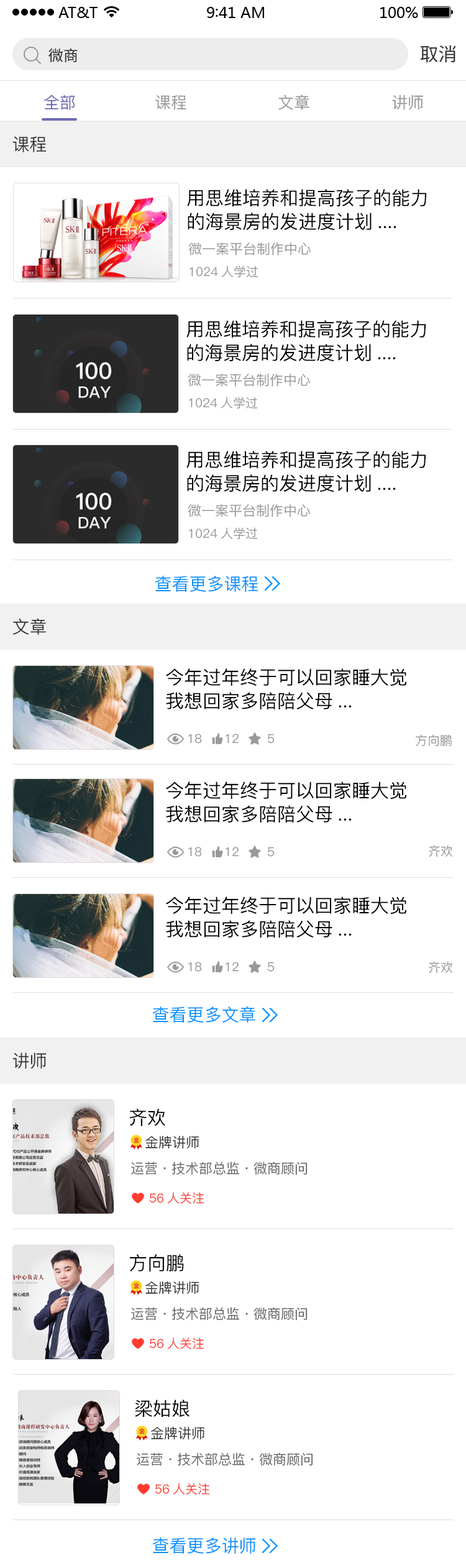
<style>
.page{position:relative;width:466px;height:1568px;background:#ffffff}
.page>*{position:absolute;margin:0}
.t1{font:14.9px "SourceHanSansCN-Regular";color:#333333}
.t2{font:18.7px "SourceHanSansCN-Regular";color:#333333}
.t3{font:16.2px "PingFang-SC-Medium";color:#6e6ab4}
.t4{font:16.2px "PingFang-SC-Medium";color:#999999}
.t5{font:17.4px "PingFang-SC-Medium";color:#333333}
.t6{font:18.7px/23.6px "PingFang-SC-Medium";color:#000000}
.t7{font:13.7px "PingFang-SC-Medium";color:#999999}
.t8{font:12.4px "PingFang-SC-Medium";color:#999999}
.t9{font:17.4px "PingFang-SC-Medium";color:#0090ff}
.t10{font:18.7px "PingFang-SC-Medium";color:#000000}
.t11{font:13.7px "PingFang-SC-Medium";color:#333333}
.t12{font:13.7px "PingFang-SC-Medium";color:#666666}
.t13{font:12.4px "PingFang-SC-Medium";color:#ff3b30}
</style>
<div class="page">
<p class="t1" style="left:48px;top:48px;width:30px;height:15px">微商</p>
<p class="t2" style="left:420px;top:45px;width:36px;height:18px">取消</p>
<p class="t3" style="left:44px;top:95px;width:31px;height:15px">全部</p>
<p class="t4" style="left:155px;top:95px;width:32px;height:15px">课程</p>
<p class="t4" style="left:279px;top:95px;width:31px;height:15px">文章</p>
<p class="t4" style="left:392px;top:95px;width:31px;height:15px">讲师</p>
<p class="t5" style="left:12px;top:136px;width:35px;height:16px">课程</p>
<p class="t6" style="left:187px;top:189px;width:240px;height:41px">用思维培养和提高孩子的能力<br>的海景房的发进度计划....</p>
<p class="t7" style="left:188px;top:242px;width:123px;height:14px">微一案平台制作中心</p>
<p class="t8" style="left:190px;top:265px;width:69px;height:13px">1024人学过</p>
<p class="t6" style="left:187px;top:320px;width:240px;height:41px">用思维培养和提高孩子的能力<br>的海景房的发进度计划....</p>
<p class="t7" style="left:188px;top:373px;width:123px;height:14px">微一案平台制作中心</p>
<p class="t8" style="left:189px;top:397px;width:69px;height:12px">1024人学过</p>
<p class="t6" style="left:187px;top:451px;width:240px;height:41px">用思维培养和提高孩子的能力<br>的海景房的发进度计划....</p>
<p class="t7" style="left:188px;top:504px;width:123px;height:13px">微一案平台制作中心</p>
<p class="t8" style="left:189px;top:527px;width:69px;height:13px">1024人学过</p>
<p class="t9" style="left:155px;top:576px;width:104px;height:16px">查看更多课程</p>
<p class="t5" style="left:12px;top:619px;width:34px;height:16px">文章</p>
<p class="t6" style="left:166px;top:668px;width:241px;height:41px">今年过年终于可以回家睡大觉<br>我想回家多陪陪父母...</p>
<p class="t8" style="left:188px;top:734px;width:14px;height:10px">18</p>
<p class="t8" style="left:226px;top:734px;width:13px;height:10px">12</p>
<p class="t8" style="left:268px;top:734px;width:7px;height:10px">5</p>
<p class="t8" style="left:416px;top:734px;width:36px;height:13px">方向鹏</p>
<p class="t6" style="left:166px;top:782px;width:241px;height:41px">今年过年终于可以回家睡大觉<br>我想回家多陪陪父母...</p>
<p class="t8" style="left:429px;top:845px;width:24px;height:12px">齐欢</p>
<p class="t8" style="left:188px;top:847px;width:14px;height:10px">18</p>
<p class="t8" style="left:226px;top:847px;width:13px;height:10px">12</p>
<p class="t8" style="left:268px;top:847px;width:7px;height:10px">5</p>
<p class="t6" style="left:166px;top:897px;width:241px;height:41px">今年过年终于可以回家睡大觉<br>我想回家多陪陪父母...</p>
<p class="t8" style="left:188px;top:962px;width:14px;height:10px">18</p>
<p class="t8" style="left:226px;top:962px;width:13px;height:10px">12</p>
<p class="t8" style="left:268px;top:962px;width:7px;height:10px">5</p>
<p class="t8" style="left:429px;top:961px;width:24px;height:12px">齐欢</p>
<p class="t9" style="left:152px;top:1007px;width:104px;height:16px">查看更多文章</p>
<p class="t5" style="left:12px;top:1053px;width:35px;height:16px">讲师</p>
<p class="t10" style="left:129px;top:1109px;width:36px;height:17px">齐欢</p>
<p class="t11" style="left:145px;top:1135px;width:55px;height:14px">金牌讲师</p>
<p class="t12" style="left:131px;top:1161px;width:177px;height:14px">运营·技术部总监·微商顾问</p>
<p class="t13" style="left:150px;top:1192px;width:55px;height:12px">56人关注</p>
<p class="t10" style="left:130px;top:1254px;width:54px;height:18px">方向鹏</p>
<p class="t11" style="left:145px;top:1281px;width:55px;height:13px">金牌讲师</p>
<p class="t12" style="left:131px;top:1307px;width:177px;height:14px">运营·技术部总监·微商顾问</p>
<p class="t13" style="left:150px;top:1337px;width:55px;height:12px">56人关注</p>
<p class="t10" style="left:135px;top:1400px;width:55px;height:17px">梁姑娘</p>
<p class="t11" style="left:151px;top:1426px;width:54px;height:14px">金牌讲师</p>
<p class="t12" style="left:137px;top:1452px;width:176px;height:14px">运营·技术部总监·微商顾问</p>
<p class="t13" style="left:155px;top:1483px;width:55px;height:12px">56人关注</p>
<p class="t9" style="left:152px;top:1538px;width:104px;height:16px">查看更多讲师</p>
</div>
